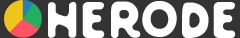
<style>
.page{position:relative;width:240px;height:38px;background:#333333}
.page>*{position:absolute;margin:0}
.t1{font:54px "FS-North-Land-Sans";color:#ffffff}
</style>
<div class="page">
<p class="t1" style="left:48px;top:1px;width:188px;height:38px">herode</p>
</div>
